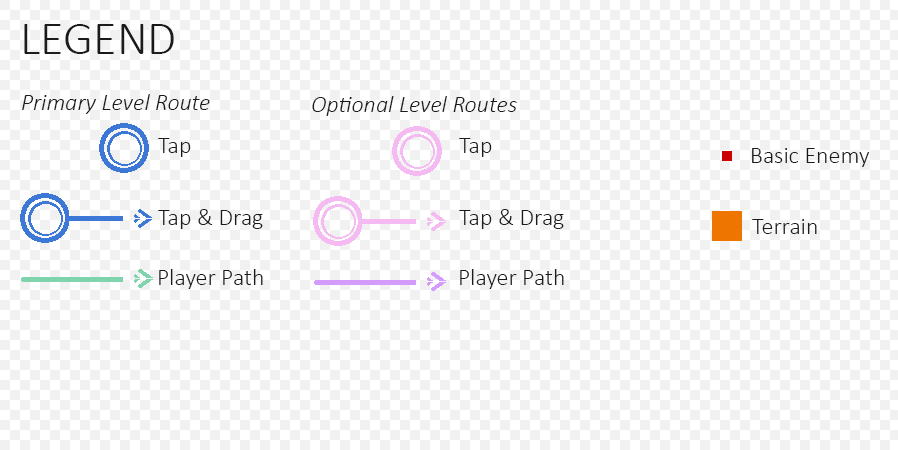
<style>
.page{position:relative;width:898px;height:450px;background:#f1f1f1}
.page>*{position:absolute;margin:0}
.t1{font:48px "Calibri-Light";color:#1b1b1b}
.t2{font:24px "Calibri-LightItalic";color:#1b1b1b}
.t3{font:24px "Calibri-Light";color:#1b1b1b}
</style>
<div class="page">
<p class="t1" style="left:24px;top:24px;width:150px;height:30px">LEGEND</p>
<p class="t2" style="left:22px;top:94px;width:188px;height:20px">Primary Level Route</p>
<p class="t2" style="left:312px;top:96px;width:205px;height:20px">Optional Level Routes</p>
<p class="t3" style="left:158px;top:138px;width:33px;height:19px">Tap</p>
<p class="t3" style="left:459px;top:138px;width:33px;height:19px">Tap</p>
<p class="t3" style="left:752px;top:148px;width:118px;height:19px">Basic Enemy</p>
<p class="t3" style="left:158px;top:209px;width:105px;height:20px">Tap &amp; Drag</p>
<p class="t3" style="left:459px;top:209px;width:105px;height:20px">Tap &amp; Drag</p>
<p class="t3" style="left:752px;top:219px;width:65px;height:15px">Terrain</p>
<p class="t3" style="left:159px;top:269px;width:104px;height:20px">Player Path</p>
<p class="t3" style="left:460px;top:269px;width:104px;height:20px">Player Path</p>
</div>
